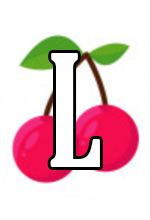
<style>
.page{position:relative;width:150px;height:220px;background:#ffffff}
.page>*{position:absolute;margin:0}
.t1{font:150px "GloucesterMT-ExtraCondensed";color:#ffffff}
</style>
<div class="page">
<p class="t1" style="left:50px;top:53px;width:50px;height:114px">L</p>
</div>
